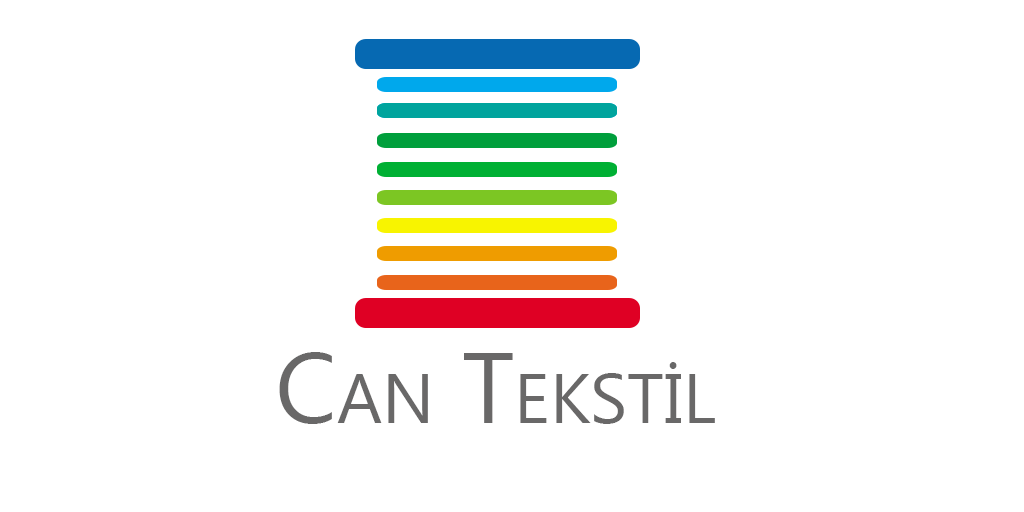
<style>
.page{position:relative;width:1024px;height:512px;background:#ffffff}
.page>*{position:absolute;margin:0}
.t1{font:100px "Ebrima";color:#6a6969;font-variant:small-caps}
</style>
<div class="page">
<p class="t1" style="left:279px;top:352px;width:436px;height:72px">Can Tekstil</p>
</div>
